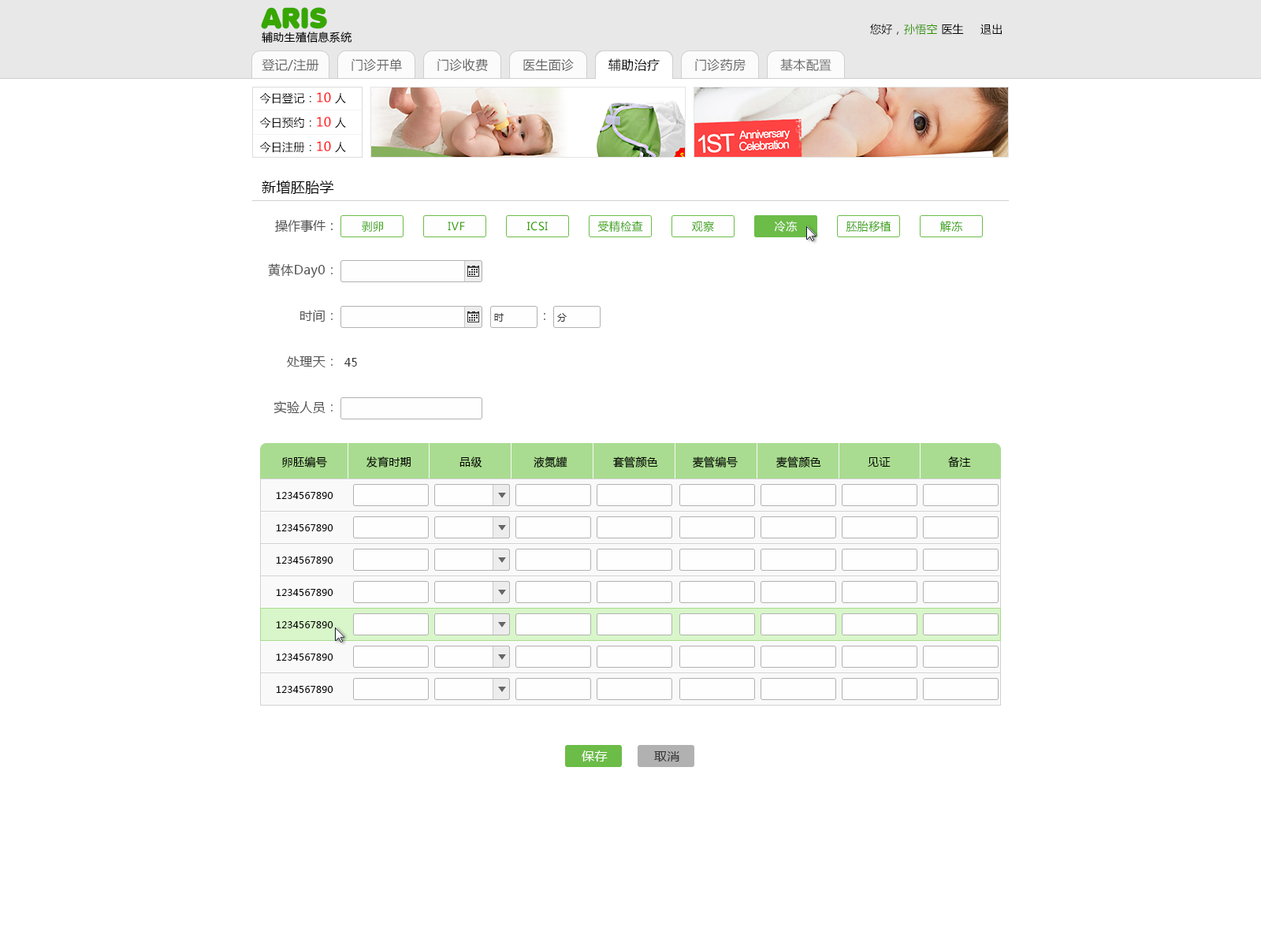
<style>
.page{position:relative;width:1261px;height:946px;background:#ffffff}
.page>*{position:absolute;margin:0}
.t1{font:14.2px "MicrosoftYaHei";letter-spacing:0.022em;color:#000000}
.t2{font:12.6px "MicrosoftYaHei";color:#4f4f4f}
.t3{font:11px "MicrosoftYaHei";letter-spacing:0.022em;color:#32a000}
.t4{font:11px "MicrosoftYaHei";letter-spacing:0.022em;color:#ffffff}
.t5{font:12.6px "MicrosoftYaHei";letter-spacing:0.022em;color:#4f4f4f}
.t6{font:12.6px "MicrosoftYaHei";color:#666666}
.t7{font:9.5px "MicrosoftYaHei";letter-spacing:0.022em;color:#333333}
.t8{font:12.6px "MicrosoftYaHei"}
.t9{font:11px "MicrosoftYaHei";letter-spacing:0.022em;color:#333333}
.t10{font:11px "MicrosoftYaHei";letter-spacing:0.022em;color:#000000}
.t11{font:9.5px "MicrosoftYaHei";letter-spacing:0.022em;color:#000000}
.t12{font:12.6px "MicrosoftYaHei";letter-spacing:0.022em;color:#ffffff}
.t13{font:12.6px "MicrosoftYaHei";letter-spacing:0.022em;color:#333333}
</style>
<div class="page">
<p class="t1" style="left:262px;top:180px;width:72px;height:14px">新增胚胎学</p>
<p class="t2" style="left:275px;top:219px;width:58px;height:13px">操作事件：</p>
<p class="t3" style="left:362px;top:221px;width:21px;height:11px">剥卵</p>
<p class="t3" style="left:448px;top:221px;width:17px;height:9px">IVF</p>
<p class="t3" style="left:527px;top:221px;width:21px;height:10px">ICSI</p>
<p class="t3" style="left:597px;top:221px;width:46px;height:11px">受精检查</p>
<p class="t3" style="left:691px;top:221px;width:23px;height:11px">观察</p>
<p class="t4" style="left:775px;top:221px;width:23px;height:11px">冷冻</p>
<p class="t4" style="left:775px;top:221px;width:23px;height:11px">冷冻</p>
<p class="t3" style="left:846px;top:221px;width:45px;height:11px">胚胎移植</p>
<p class="t3" style="left:940px;top:221px;width:23px;height:11px">解冻</p>
<p class="t5" style="left:268px;top:263px;width:65px;height:14px">黄体Day0<span class="t6">：</span></p>
<p class="t5" style="left:300px;top:310px;width:33px;height:12px">时间<span class="t6">：</span></p>
<p class="t7" style="left:494px;top:313px;width:10px;height:9px">时</p>
<p class="t8" style="left:544px;top:313px;width:1px;height:7px">：</p>
<p class="t7" style="left:557px;top:313px;width:10px;height:9px">分</p>
<p class="t5" style="left:287px;top:356px;width:46px;height:11px">处理天<span class="t6">：</span></p>
<p class="t9" style="left:344px;top:358px;width:13px;height:8px">45</p>
<p class="t5" style="left:273px;top:400px;width:60px;height:14px">实验人员<span class="t6">：</span></p>
<p class="t10" style="left:282px;top:456px;width:45px;height:11px">卵胚编号</p>
<p class="t10" style="left:366px;top:456px;width:45px;height:11px">发育时期</p>
<p class="t10" style="left:459px;top:456px;width:23px;height:11px">品级</p>
<p class="t10" style="left:534px;top:456px;width:33px;height:12px">液氮罐</p>
<p class="t10" style="left:613px;top:456px;width:45px;height:12px">套管颜色</p>
<p class="t10" style="left:693px;top:456px;width:45px;height:12px">麦管编号</p>
<p class="t10" style="left:776px;top:456px;width:45px;height:12px">麦管颜色</p>
<p class="t10" style="left:868px;top:457px;width:23px;height:10px">见证</p>
<p class="t10" style="left:948px;top:456px;width:23px;height:11px">备注</p>
<p class="t11" style="left:276px;top:492px;width:57px;height:7px">1234567890</p>
<p class="t11" style="left:276px;top:524px;width:57px;height:7px">1234567890</p>
<p class="t11" style="left:276px;top:556px;width:57px;height:7px">1234567890</p>
<p class="t11" style="left:276px;top:589px;width:57px;height:7px">1234567890</p>
<p class="t11" style="left:276px;top:621px;width:57px;height:7px">1234567890</p>
<p class="t11" style="left:276px;top:653px;width:57px;height:7px">1234567890</p>
<p class="t11" style="left:276px;top:686px;width:57px;height:7px">1234567890</p>
<p class="t12" style="left:582px;top:750px;width:26px;height:11px">保存</p>
<p class="t13" style="left:654px;top:751px;width:25px;height:10px">取消</p>
</div>
